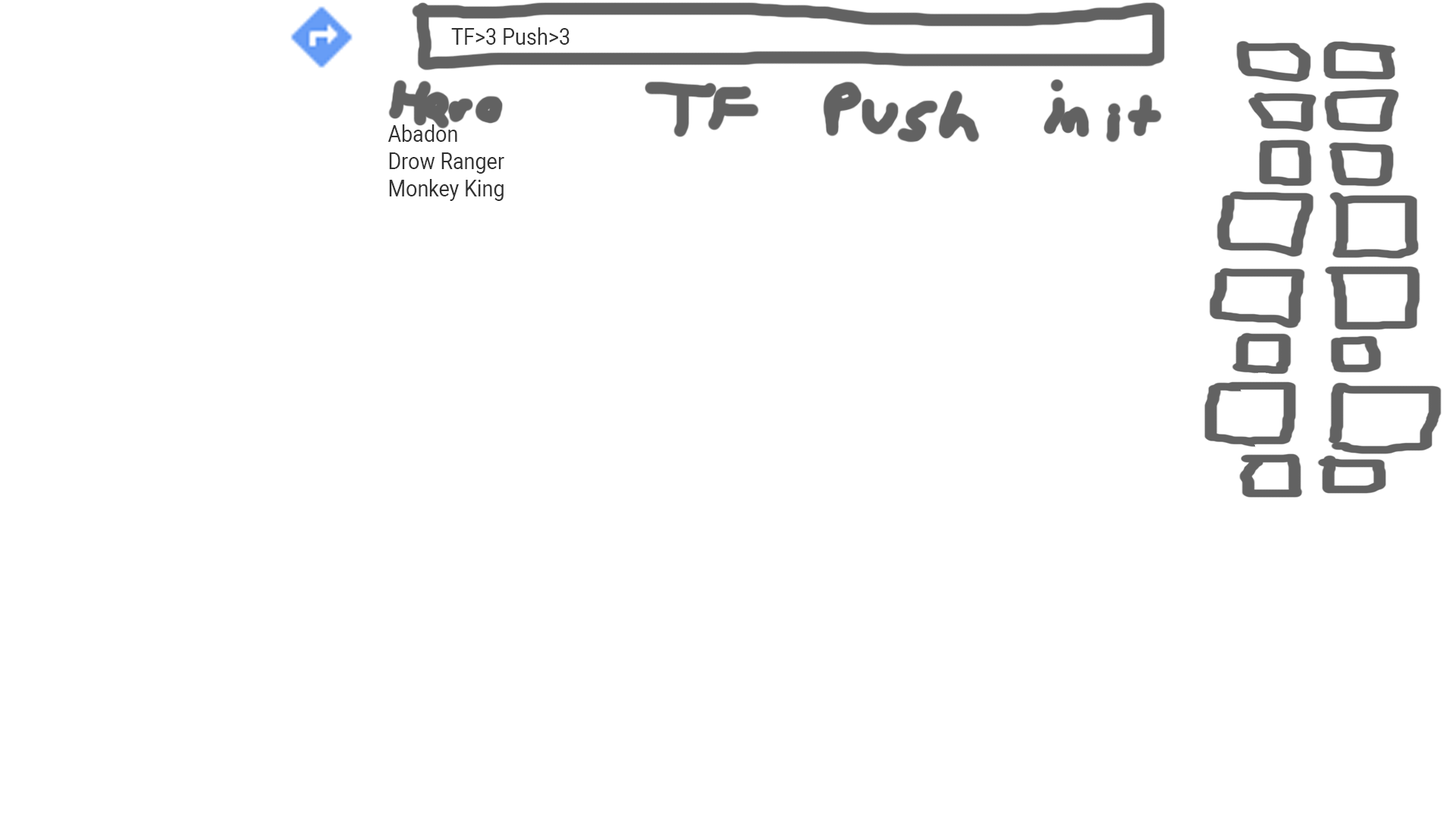
<style>
.page{position:relative;width:1456px;height:819px;background:#ffffff}
.page>*{position:absolute;margin:0}
.t1{font:22.7px "Roboto-Regular";color:#313131;scale:0.9 1}
</style>
<div class="page">
<p class="t1" style="left:451px;top:27px;width:119px;height:18px">TF&gt;3 Push&gt;3</p>
<p class="t1" style="left:388px;top:124px;width:116px;height:77px">Abadon<br>Drow Ranger<br>Monkey King</p>
</div>
